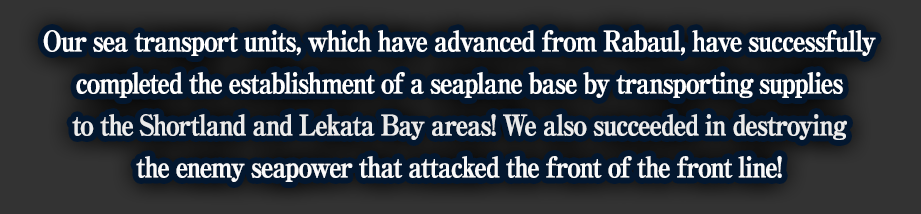
<style>
.page{position:relative;width:921px;height:214px;background:#03172f}
.page>*{position:absolute;margin:0}
.t1{font:28px/42px "RyuminPro-ExBold";letter-spacing:-0.08em;color:#ffffff;font-weight:bold;scale:0.9 1}
</style>
<div class="page">
<p class="t1" style="left:43px;top:30px;width:833px;height:152px;text-align:center">Our sea transport units, which have advanced from Rabaul, have successfully<br>completed the establishment of a seaplane base by transporting supplies<br>to the Shortland and Lekata Bay areas! We also succeeded in destroying<br>the enemy seapower that attacked the front of the front line!</p>
</div>
